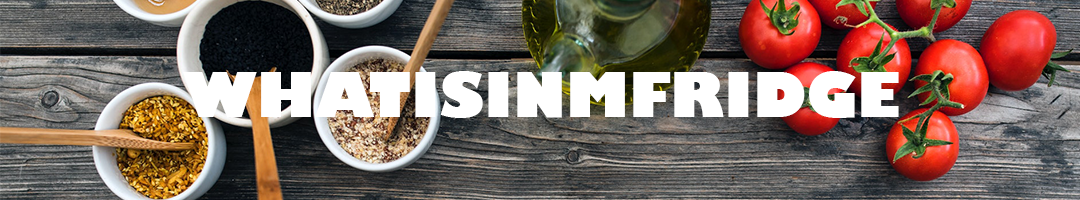
<style>
.page{position:relative;width:1080px;height:200px}
.page>*{position:absolute;margin:0}
.t1{font:60px "GillSans-UltraBold";color:#ffffff}
</style>
<div class="page">
<p class="t1" style="left:183px;top:71px;width:716px;height:47px">WHATISINMFRIDGE</p>
</div>
